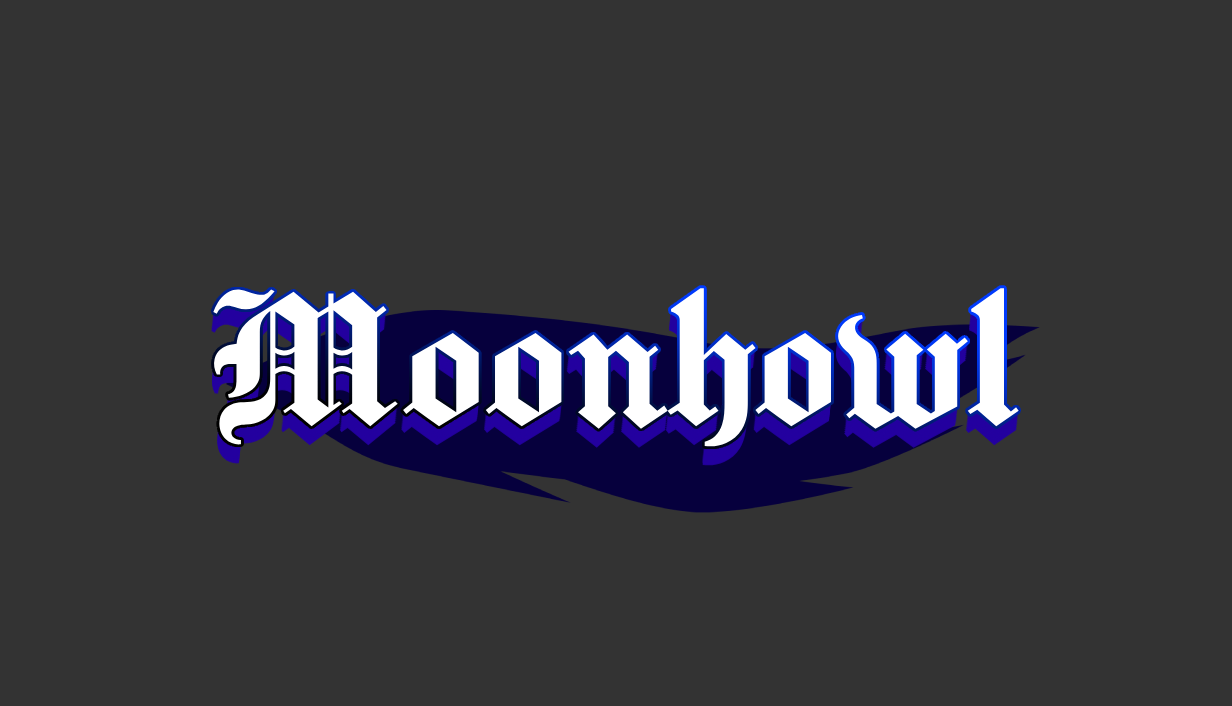
<style>
.page{position:relative;width:1232px;height:706px;background:#333333}
.page>*{position:absolute;margin:0}
.t1{font:179.8px "Chomsky";color:#ffffff}
</style>
<div class="page">
<p class="t1" style="left:213px;top:288px;width:806px;height:159px">Moonhowl</p>
</div>
